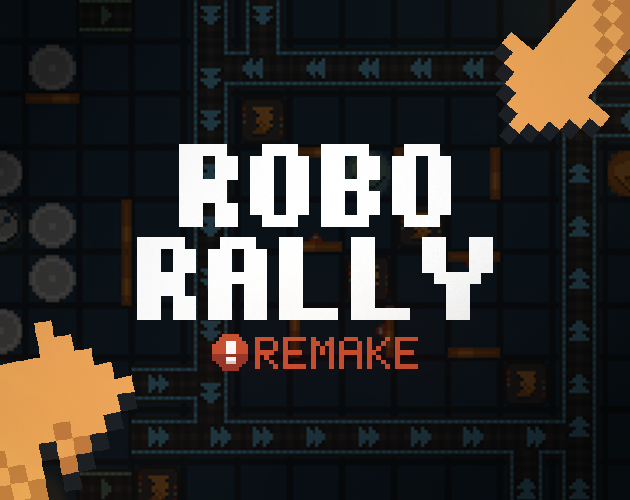
<style>
.page{position:relative;width:630px;height:500px}
.page>*{position:absolute;margin:0}
.t1{font:95px/92.8px "pixelmix-bold";color:#ffffff}
.t2{font:37.3px "pixelmix";color:#c75533}
</style>
<div class="page">
<p class="t1" style="left:137px;top:144px;width:356px;height:176px;text-align:center">ROBO<br>RALLY</p>
<p class="t2" style="left:255px;top:337px;width:163px;height:32px">REMAKE</p>
</div>
